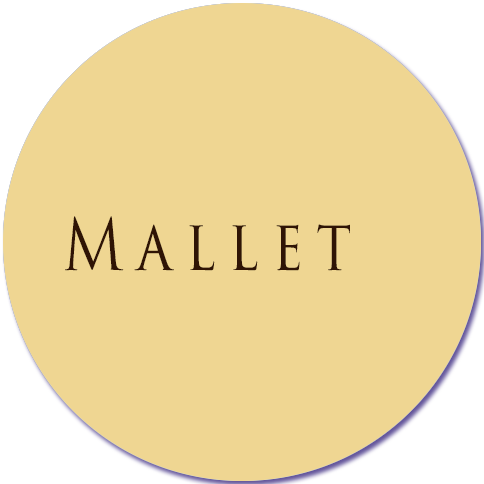
<style>
.page{position:relative;width:484px;height:484px;background:#efd692}
.page>*{position:absolute;margin:0}
.t1{font:70px "TrajanPro3-Regular";letter-spacing:0.22em;color:#2f1405;font-variant:small-caps;scale:0.83 1}
</style>
<div class="page">
<p class="t1" style="left:65px;top:216px;width:285px;height:55px">Mallet</p>
</div>
